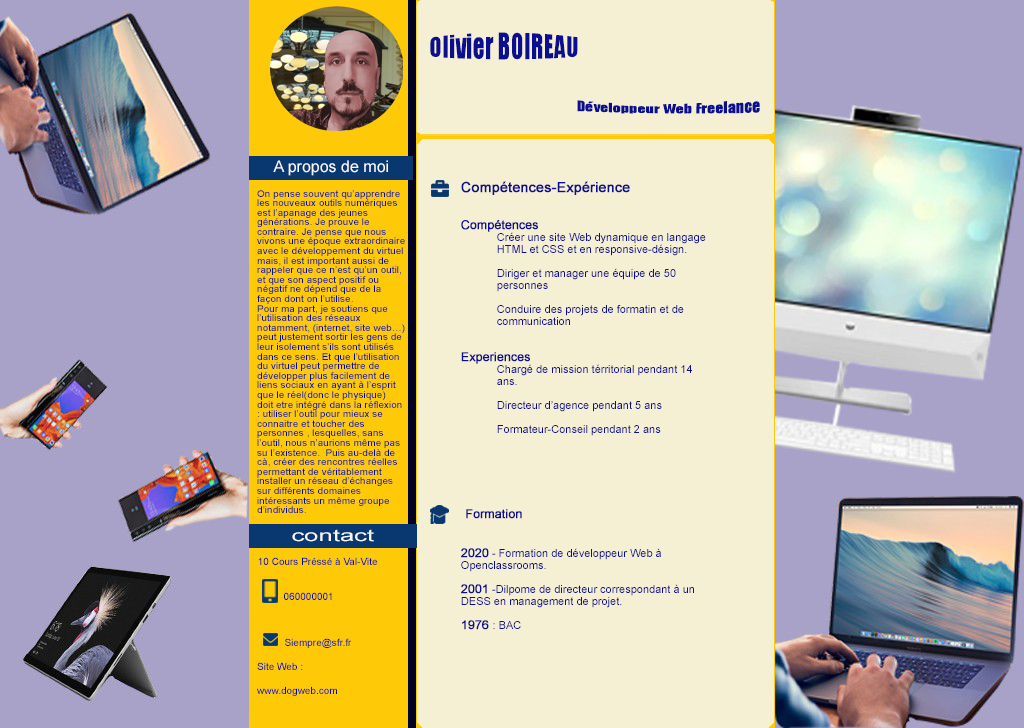
<style>
.page{position:relative;width:1024px;height:728px;background:#f5efd4}
.page>*{position:absolute;margin:0}
.t1{font:24px "Impact";color:#0b0e90}
.t2{font:16px "Impact";color:#0b0e90}
.t3{font:16px "ArialMT";color:#f8f8fb}
.t4{font:14px "ArialMT";color:#0b0e90;font-weight:bold}
.t5{font:9.6px/9.6px "ArialMT";color:#0b0e90;scale:1.04 1}
.t6{font:11px/12px "ArialMT";color:#0b0e90}
.t7{font:12px/12px "ArialMT";color:#0b0e90;font-weight:bold}
.t8{font:12px "ArialMT";color:#0b0e90;font-weight:bold}
.t9{font:16px "ArialMT";color:#f8f8fb;scale:1.61 1}
.t10{font:10px "ArialMT";color:#0b0e90}
.t11{font:10px/24px "ArialMT";color:#0b0e90}
</style>
<div class="page">
<p class="t1" style="left:430px;top:32px;width:148px;height:28px">Olivier BOIREAU</p>
<p class="t2" style="left:577px;top:100px;width:183px;height:14px">Développeur Web Freelance</p>
<p class="t3" style="left:273px;top:160px;width:115px;height:16px">A propos de moi</p>
<p class="t4" style="left:461px;top:181px;width:169px;height:14px">Compétences-Expérience</p>
<p class="t5" style="left:257px;top:190px;width:148px;height:323px">On pense souvent qu’apprendre les nouveaux outils numériques est l’apanage des jeunes générations. Je prouve le contraire. Je pense que nous vivons une époque extraordinaire avec le développement du virtuel mais, il est important aussi de rappeler que ce n’est qu’un outil, et que son aspect positif ou négatif ne dépend que de la façon dont on l’utilise.<br>Pour ma part, je soutiens que l’utilisation des réseaux notamment, (internet, site web…) peut justement sortir les gens de leur isolement s’ils sont utilisés dans ce sens. Et que l’utilisation du virtuel peut permettre de développer plus facilement de liens sociaux en ayant à l’esprit que le réel(donc le physique)  doit etre intégré dans la réflexion : utiliser l’outil pour mieux se connaitre et toucher des personnes , lesquelles, sans l’outil, nous n’aurions même pas su l’existence.  Puis au-delà de cà, créer des rencontres réelles permettant de véritablement installer un réseau d’échanges sur différents domaines intéressants un même groupe d’individus.</p>
<p class="t6" style="left:461px;top:220px;width:245px;height:216px"><span class="t7">Compétences </span><br> Créer une site Web dynamique en langage   HTML et CSS et en responsive-désign.<br><br> Diriger et manager une équipe de 50   personnes<br><br> Conduire des projets de formatin et de   communication<br><br><br><span class="t7">Experiences<br> </span>Chargé de mission térritorial pendant 14   ans.<br><br> Directeur d’agence pendant 5 ans<br><br> Formateur-Conseil pendant 2 ans</p>
<p class="t8" style="left:466px;top:509px;width:56px;height:10px">Formation</p>
<p class="t9" style="left:292px;top:529px;width:82px;height:13px">contact</p>
<p class="t10" style="left:258px;top:557px;width:119px;height:8px">10 Cours Préssé à Val-Vite</p>
<p class="t6" style="left:461px;top:548px;width:233px;height:82px"><span class="t7">2020</span> - Formation de développeur Web à Openclassrooms.<br><br><span class="t7">2001</span> -Dilpome de directeur correspondant à un DESS en management de projet.<br><br><span class="t7">1976 </span>: BAC</p>
<p class="t10" style="left:284px;top:592px;width:48px;height:8px">060000001</p>
<p class="t10" style="left:285px;top:638px;width:67px;height:10px">Siempre@sfr.fr</p>
<p class="t11" style="left:257px;top:662px;width:80px;height:34px">Site Web :<br>www.dogweb.com</p>
</div>
